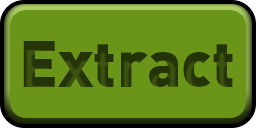
<style>
.page{position:relative;width:256px;height:128px;background:#6b9519}
.page>*{position:absolute;margin:0}
.t1{font:64px "DIN-Black";color:#253309}
</style>
<div class="page">
<p class="t1" style="left:23px;top:41px;width:210px;height:46px">Extract</p>
</div>
